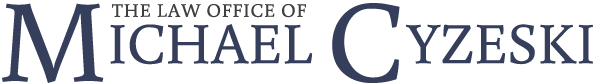
<style>
.page{position:relative;width:600px;height:84px;background:#ffffff}
.page>*{position:absolute;margin:0}
.t1{font:117px "Buenard-Regular";letter-spacing:-0.005em;color:#353e5b}
.t2{font:19px "Buenard-Regular";letter-spacing:0.05em;color:#3e3f3e}
.t3{font:58px "Buenard-Regular";letter-spacing:-0.005em;color:#353e5b}
</style>
<div class="page">
<p class="t1" style="left:2px;top:3px;width:102px;height:80px">M</p>
<p class="t2" style="left:112px;top:3px;width:194px;height:15px">THE LAW OFFICE OF</p>
<p class="t1" style="left:332px;top:3px;width:68px;height:80px">C</p>
<p class="t3" style="left:110px;top:24px;width:203px;height:41px">ICHAEL</p>
<p class="t3" style="left:406px;top:24px;width:187px;height:41px">YZESKI</p>
</div>
